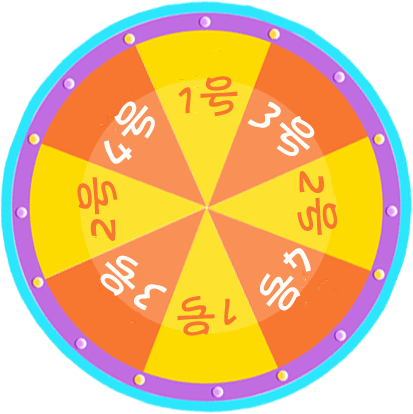
<style>
.page{position:relative;width:413px;height:414px;background:#ffffff}
.page>*{position:absolute;margin:0}
.t1{font:47.6px "FZKATJW--GB1-0";color:#f77730}
.t2{font:47.6px "FZKATJW--GB1-0";color:#fefdfa}
</style>
<div class="page">
<p class="t1" style="left:178px;top:76px;width:60px;height:41px">1号</p>
<p class="t2" style="left:104px;top:101px;width:51px;height:63px;rotate:-47deg">4号</p>
<p class="t2" style="left:247px;top:101px;width:68px;height:55px;rotate:45deg">3号</p>
<p class="t1" style="left:297px;top:171px;width:41px;height:64px;rotate:90deg">2号</p>
<p class="t1" style="left:77px;top:177px;width:41px;height:64px;rotate:-91deg">2号</p>
<p class="t2" style="left:100px;top:255px;width:67px;height:56px;rotate:-134deg">3号</p>
<p class="t2" style="left:260px;top:248px;width:51px;height:63px;rotate:134deg">4号</p>
<p class="t1" style="left:177px;top:295px;width:60px;height:41px;rotate:-180deg">1号</p>
</div>
